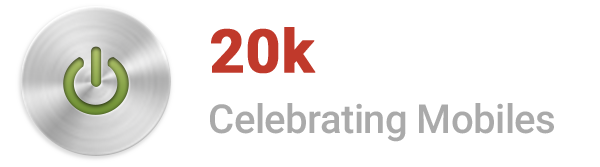
<style>
.page{position:relative;width:600px;height:167px;background:#ffffff}
.page>*{position:absolute;margin:0}
.t1{font:60px "Roboto-Bold";color:#ffffff;font-weight:bold}
.t2{font:60px "Roboto-Bold";color:#c0392b;font-weight:bold}
.t3{font:40px "Roboto-Medium";letter-spacing:-0.015em;color:#aaaaaa}
</style>
<div class="page">
<p class="t1" style="left:211px;top:27px;width:313px;height:47px"><span class="t2">20k </span>Mobile</p>
<p class="t3" style="left:210px;top:103px;width:344px;height:39px">Celebrating Mobiles</p>
</div>
